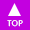
<style>
.page{position:relative;width:30px;height:30px;background:#c300e0}
.page>*{position:absolute;margin:0}
.t1{font:8px "SegoeUI";letter-spacing:0.04em;color:#ffffff}
</style>
<div class="page">
<p class="t1" style="left:7px;top:20px;width:16px;height:7px">TOP</p>
</div>
